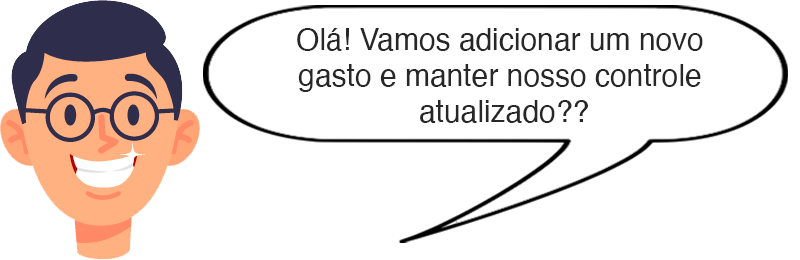
<style>
.page{position:relative;width:800px;height:260px;background:#ffffff}
.page>*{position:absolute;margin:0}
.t1{font:30px "Helvetica";color:#282728}
</style>
<div class="page">
<p class="t1" style="left:297px;top:28px;width:406px;height:95px;text-align:center">Olá! Vamos adicionar um novo <br>gasto e manter nosso controle <br>atualizado??</p>
</div>
